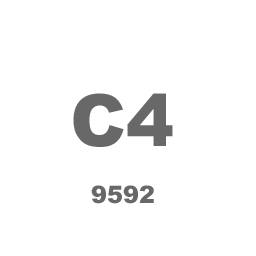
<style>
.page{position:relative;width:256px;height:256px;background:#ffffff}
.page>*{position:absolute;margin:0}
.t1{font:72px "Arial-Black";color:#696868}
.t2{font:24px "Arial-Black";color:#696868}
</style>
<div class="page">
<p class="t1" style="left:73px;top:93px;width:100px;height:54px">C4</p>
<p class="t2" style="left:91px;top:185px;width:63px;height:19px">9592</p>
</div>
